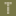
<style>
.page{position:relative;width:16px;height:16px;background:#787746}
.page>*{position:absolute;margin:0}
.t1{font:18px "3x5";color:#b4af91;text-transform:uppercase}
</style>
<div class="page">
<p class="t1" style="left:4px;top:2px;width:8px;height:12px">T</p>
</div>
